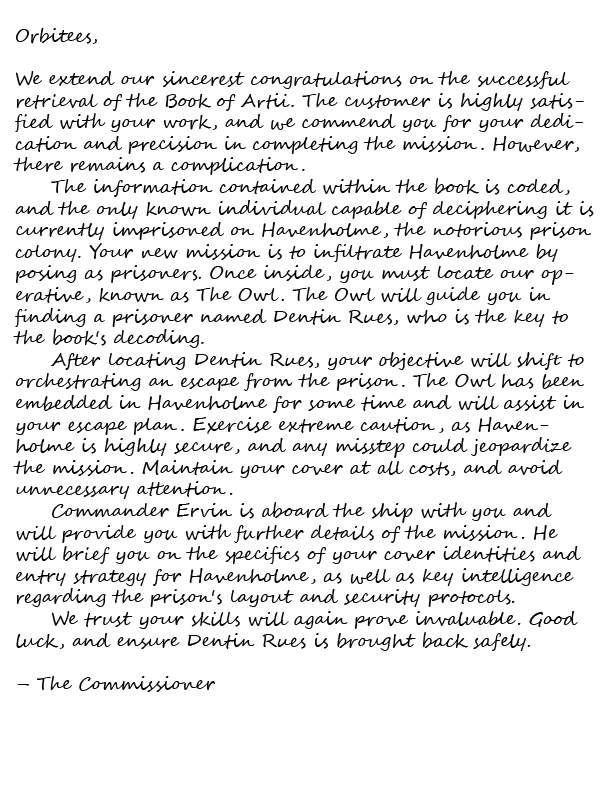
<style>
.page{position:relative;width:612px;height:792px;background:#ffffff}
.page>*{position:absolute;margin:0}
.t1{font:18px "SegoeScript";color:#000000}
</style>
<div class="page">
<p class="t1" style="left:13px;top:28px;width:581px;height:664px">Orbitees,<br><br>We extend our sincerest congratulations on the successful retrieval of the Book of Artii. The customer is highly satisfied with your work, and we commend you for your dedication and precision in completing the mission. However, there remains a complication.<br> The information contained within the book is coded, and the only known individual capable of deciphering it is currently imprisoned on Havenholme, the notorious prison colony. Your new mission is to infiltrate Havenholme by posing as prisoners. Once inside, you must locate our operative, known as The Owl. The Owl will guide you in finding a prisoner named Dentin Rues, who is the key to the book's decoding.<br> After locating Dentin Rues, your objective will shift to orchestrating an escape from the prison. The Owl has been embedded in Havenholme for some time and will assist in your escape plan. Exercise extreme caution, as Havenholme is highly secure, and any misstep could jeopardize the mission. Maintain your cover at all costs, and avoid unnecessary attention.<br> Commander Ervin is aboard the ship with you and will provide you with further details of the mission. He will brief you on the specifics of your cover identities and entry strategy for Havenholme, as well as key intelligence regarding the prison's layout and security protocols. <br> We trust your skills will again prove invaluable. Good luck, and ensure Dentin Rues is brought back safely.<br><br>– The Commissioner</p>
</div>
